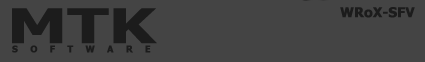
<style>
.page{position:relative;width:425px;height:62px;background:#444444}
.page>*{position:absolute;margin:0}
.t1{font:47.7px "Tahoma-Bold";color:#1c1c1c;scale:1.41 1}
.t2{font:13.3px "Tahoma-Bold";color:#1c1c1c;font-weight:bold}
.t3{font:9.4px "Tahoma-Bold";color:#1c1c1c;font-weight:bold}
</style>
<div class="page">
<p class="t1" style="left:12px;top:8px;width:145px;height:36px">MTK</p>
<p class="t2" style="left:340px;top:7px;width:75px;height:11px">WRoX-SFV</p>
<p class="t3" style="left:12px;top:45px;width:139px;height:8px">S    O    F    T    W    A    R    E</p>
</div>
